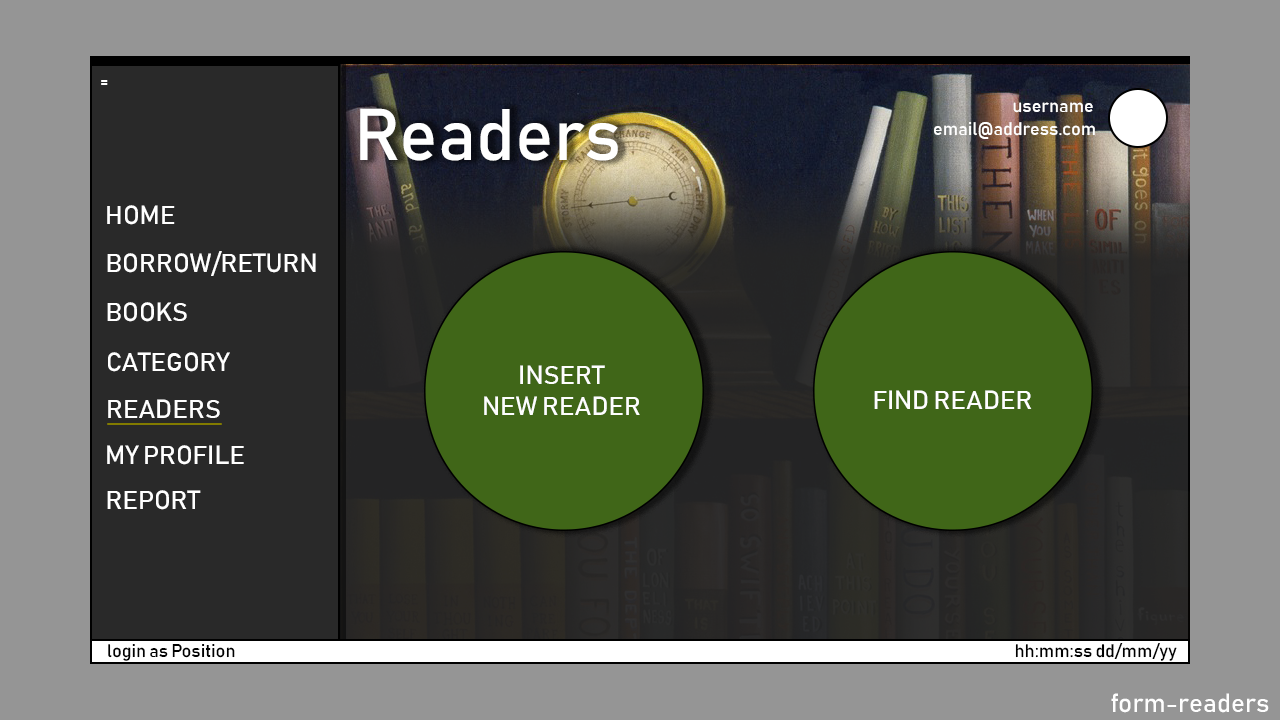
<style>
.page{position:relative;width:1280px;height:720px;background:#959595}
.page>*{position:absolute;margin:0}
.t1{font:18px "Bahnschrift";color:#ffffff}
.t2{font:72px "Bahnschrift";color:#ffffff}
.t3{font:26px "Bahnschrift";color:#ffffff}
.t4{font:26px "Bahnschrift";color:#fefefe}
.t5{font:18px "Bahnschrift";color:#000000}
</style>
<div class="page">
<p class="t1" style="left:101px;top:80px;width:7px;height:5px">=</p>
<p class="t1" style="left:1013px;top:102px;width:80px;height:11px">username</p>
<p class="t2" style="left:360px;top:108px;width:258px;height:53px">Readers</p>
<p class="t1" style="left:934px;top:122px;width:161px;height:17px">email@address.com</p>
<p class="t3" style="left:107px;top:205px;width:68px;height:20px">HOME</p>
<p class="t3" style="left:107px;top:251px;width:209px;height:25px">BORROW/RETURN</p>
<p class="t3" style="left:107px;top:302px;width:80px;height:20px">BOOKS</p>
<p class="t3" style="left:108px;top:352px;width:122px;height:20px">CATEGORY</p>
<p class="t4" style="left:484px;top:365px;width:156px;height:50px;text-align:center">INSERT<br>NEW READER</p>
<p class="t4" style="left:874px;top:390px;width:158px;height:19px">FIND READER</p>
<p class="t3" style="left:108px;top:399px;width:112px;height:19px">READERS</p>
<p class="t3" style="left:107px;top:445px;width:137px;height:20px">MY PROFILE</p>
<p class="t3" style="left:107px;top:490px;width:94px;height:20px">REPORT</p>
<p class="t5" style="left:108px;top:644px;width:127px;height:17px">login as Position</p>
<p class="t5" style="left:1015px;top:643px;width:162px;height:18px">hh:mm:ss dd/mm/yy</p>
<p class="t4" style="left:1111px;top:693px;width:158px;height:20px">form-readers</p>
</div>
